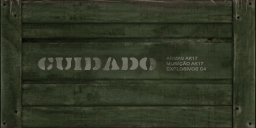
<style>
.page{position:relative;width:256px;height:128px}
.page>*{position:absolute;margin:0}
.t1{font:19.2px "DirtyBakersDozen-Regular";letter-spacing:0.02em;color:#737267;scale:1.17 1}
.t2{font:4.1px/5.3px "ArialMT";letter-spacing:0.02em;color:#737267;scale:1.17 1}
</style>
<div class="page">
<p class="t1" style="left:38px;top:57px;width:119px;height:14px">Cuidado</p>
<p class="t2" style="left:166px;top:56px;width:40px;height:15px">ARMAS AK17<br>MUNIÇÃO AK17<br>EXPLOSIVOS C4</p>
</div>
